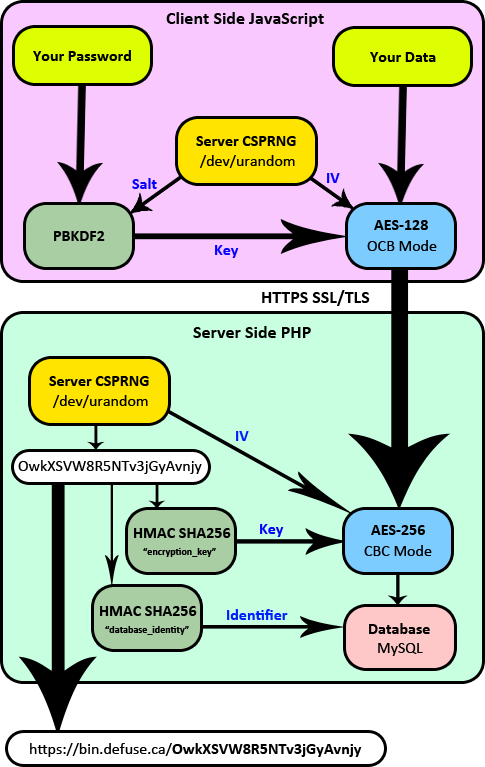
<style>
.page{position:relative;width:485px;height:767px;background:#c8ffe1}
.page>*{position:absolute;margin:0}
.t1{font:18px "Calibri-Bold";color:#000000}
.t2{font:16px "Calibri-Bold";color:#000000}
.t3{font:16px "Calibri";color:#000000}
.t4{font:16px "Calibri-Bold";color:#0600ff}
.t5{font:16px "Calibri-Bold";color:#001eff}
.t6{font:10px "Calibri-Bold";color:#000000}
</style>
<div class="page">
<p class="t1" style="left:166px;top:12px;width:158px;height:15px">Client Side JavaScript</p>
<p class="t2" style="left:33px;top:50px;width:98px;height:11px">Your Password</p>
<p class="t2" style="left:370px;top:52px;width:66px;height:10px">Your Data</p>
<p class="t2" style="left:196px;top:136px;width:100px;height:10px">Server CSPRNG</p>
<p class="t3" style="left:199px;top:155px;width:96px;height:13px">/dev/urandom</p>
<p class="t4" style="left:327px;top:173px;width:13px;height:10px">IV</p>
<p class="t4" style="left:132px;top:178px;width:25px;height:11px">Salt</p>
<p class="t2" style="left:374px;top:220px;width:54px;height:10px">AES-128</p>
<p class="t2" style="left:54px;top:231px;width:51px;height:10px">PBKDF2</p>
<p class="t4" style="left:215px;top:245px;width:24px;height:13px">Key</p>
<p class="t3" style="left:367px;top:240px;width:70px;height:11px">OCB Mode</p>
<p class="t1" style="left:262px;top:290px;width:108px;height:16px">HTTPS SSL/TLS</p>
<p class="t1" style="left:193px;top:326px;width:118px;height:12px">Server Side PHP</p>
<p class="t2" style="left:49px;top:376px;width:100px;height:10px">Server CSPRNG</p>
<p class="t3" style="left:52px;top:395px;width:96px;height:13px">/dev/urandom</p>
<p class="t5" style="left:236px;top:431px;width:13px;height:10px">IV</p>
<p class="t3" style="left:18px;top:460px;width:184px;height:14px">OwkXSVW8R5NTv3jGyAvnjy</p>
<p class="t2" style="left:134px;top:528px;width:97px;height:10px">HMAC SHA256</p>
<p class="t4" style="left:260px;top:524px;width:24px;height:13px">Key</p>
<p class="t2" style="left:371px;top:525px;width:54px;height:10px">AES-256</p>
<p class="t3" style="left:364px;top:545px;width:68px;height:11px">CBC Mode</p>
<p class="t6" style="left:143px;top:548px;width:73px;height:9px">“encryption_key”</p>
<p class="t2" style="left:100px;top:606px;width:97px;height:10px">HMAC SHA256</p>
<p class="t5" style="left:227px;top:609px;width:61px;height:11px">Identifier</p>
<p class="t6" style="left:105px;top:626px;width:84px;height:9px">“database_identity”</p>
<p class="t2" style="left:369px;top:623px;width:61px;height:11px">Database</p>
<p class="t3" style="left:378px;top:643px;width:45px;height:13px">MySQL</p>
<p class="t3" style="left:30px;top:743px;width:332px;height:14px">https://bin.defuse.ca/<span class="t2">OwkXSVW8R5NTv3jGyAvnjy</span></p>
</div>
